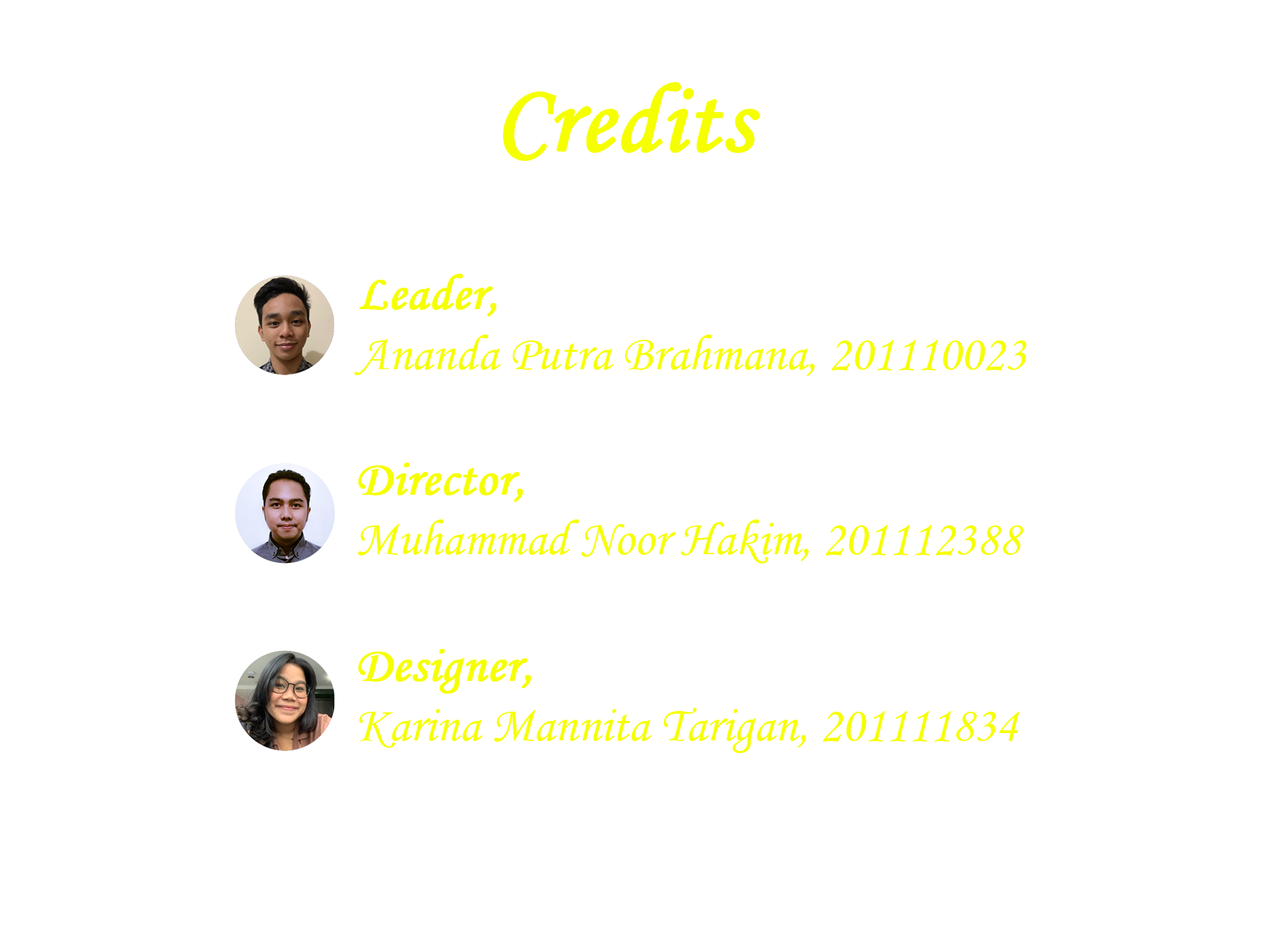
<style>
.page{position:relative;width:1261px;height:946px;background:#ffffff}
.page>*{position:absolute;margin:0}
.t1{font:97.3px "MonotypeCorsiva";color:#f6ff00;font-weight:bold}
.t2{font:50px/61.2px "MonotypeCorsiva";color:#f6ff00}
.t3{font:50px/61.2px "MonotypeCorsiva";color:#f6ff00;font-weight:bold}
.t4{font:50px "MonotypeCorsiva";color:#f6ff00}
.t5{font:50px "MonotypeCorsiva";color:#f6ff00;font-weight:bold}
</style>
<div class="page">
<p class="t1" style="left:502px;top:82px;width:258px;height:79px">Credits</p>
<p class="t2" style="left:354px;top:274px;width:673px;height:102px"><span class="t3">Leader,<br></span>Ananda Putra Brahmana, 201110023</p>
<p class="t4" style="left:358px;top:462px;width:666px;height:101px"><span class="t5">Director,<br></span>Muhammad Noor Hakim, 201112388</p>
<p class="t4" style="left:358px;top:649px;width:662px;height:104px"><span class="t5">Designer,<br></span>Karina Mannita Tarigan, 201111834</p>
</div>
